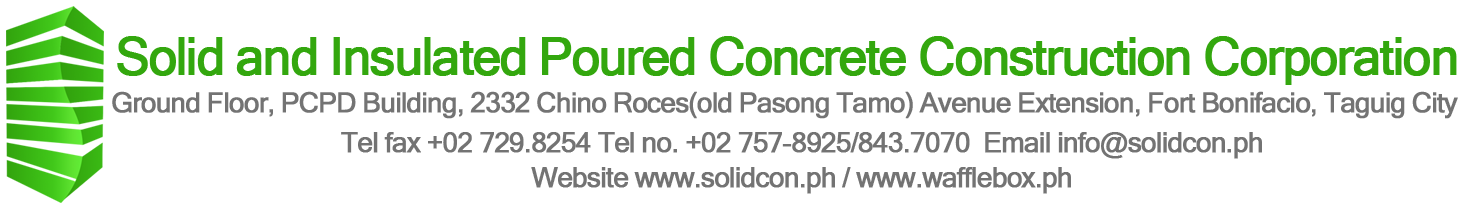
<style>
.page{position:relative;width:1465px;height:207px;background:#ffffff}
.page>*{position:absolute;margin:0}
.t1{font:51px "MicrosoftSansSerif";letter-spacing:-0.05em;color:#33a70e;font-weight:bold}
.t2{font:27.8px "MicrosoftSansSerif";letter-spacing:-0.05em;color:#737373;font-weight:bold}
.t3{font:28px "MicrosoftSansSerif";letter-spacing:-0.05em;color:#737373;font-weight:bold}
</style>
<div class="page">
<p class="t1" style="left:117px;top:36px;width:1340px;height:49px">Solid and Insulated Poured Concrete Construction Corporation</p>
<p class="t2" style="left:112px;top:91px;width:1346px;height:28px">Ground Floor, PCPD Building, 2332 Chino Roces(old Pasong Tamo) Avenue Extension, Fort Bonifacio, Taguig City</p>
<p class="t3" style="left:341px;top:132px;width:921px;height:27px">Tel fax +02 729.8254 Tel no. +02 757-8925/843.7070  Email info@solidcon.ph</p>
<p class="t3" style="left:531px;top:167px;width:540px;height:27px">Website www.solidcon.ph / www.wafflebox.ph</p>
</div>
